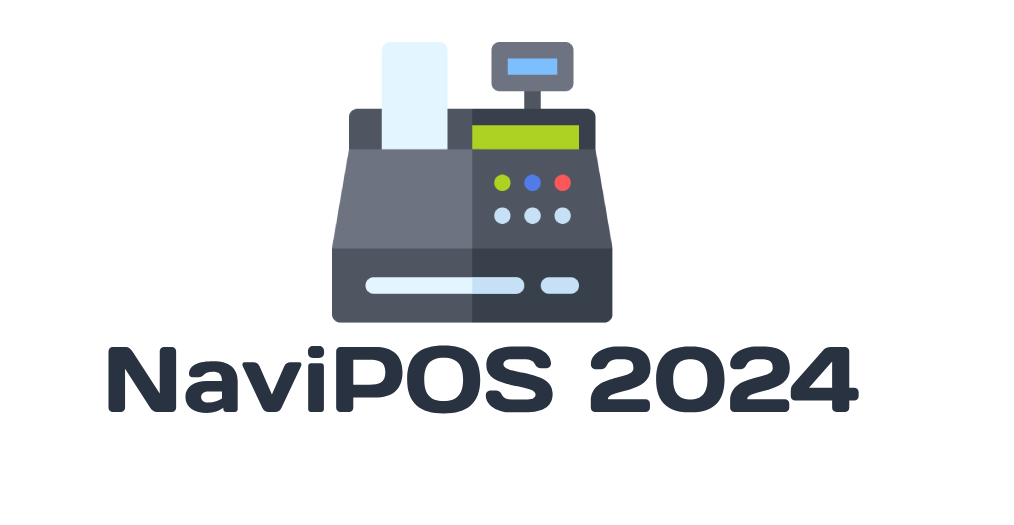
<style>
.page{position:relative;width:1014px;height:525px;background:#ffffff}
.page>*{position:absolute;margin:0}
.t1{font:93px "Days";color:#293241}
</style>
<div class="page">
<p class="t1" style="left:108px;top:345px;width:751px;height:69px">NaviPOS 2024</p>
</div>
